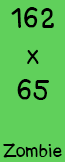
<style>
.page{position:relative;width:65px;height:162px;background:#60d05b}
.page>*{position:absolute;margin:0}
.t1{font:30px "korbau-Medium";color:#000000}
.t2{font:20px "korbau-Medium";color:#000000}
</style>
<div class="page">
<p class="t1" style="left:11px;top:7px;width:43px;height:93px;text-align:center">162<br>x<br>65</p>
<p class="t2" style="left:3px;top:143px;width:59px;height:15px">Zombie</p>
</div>
